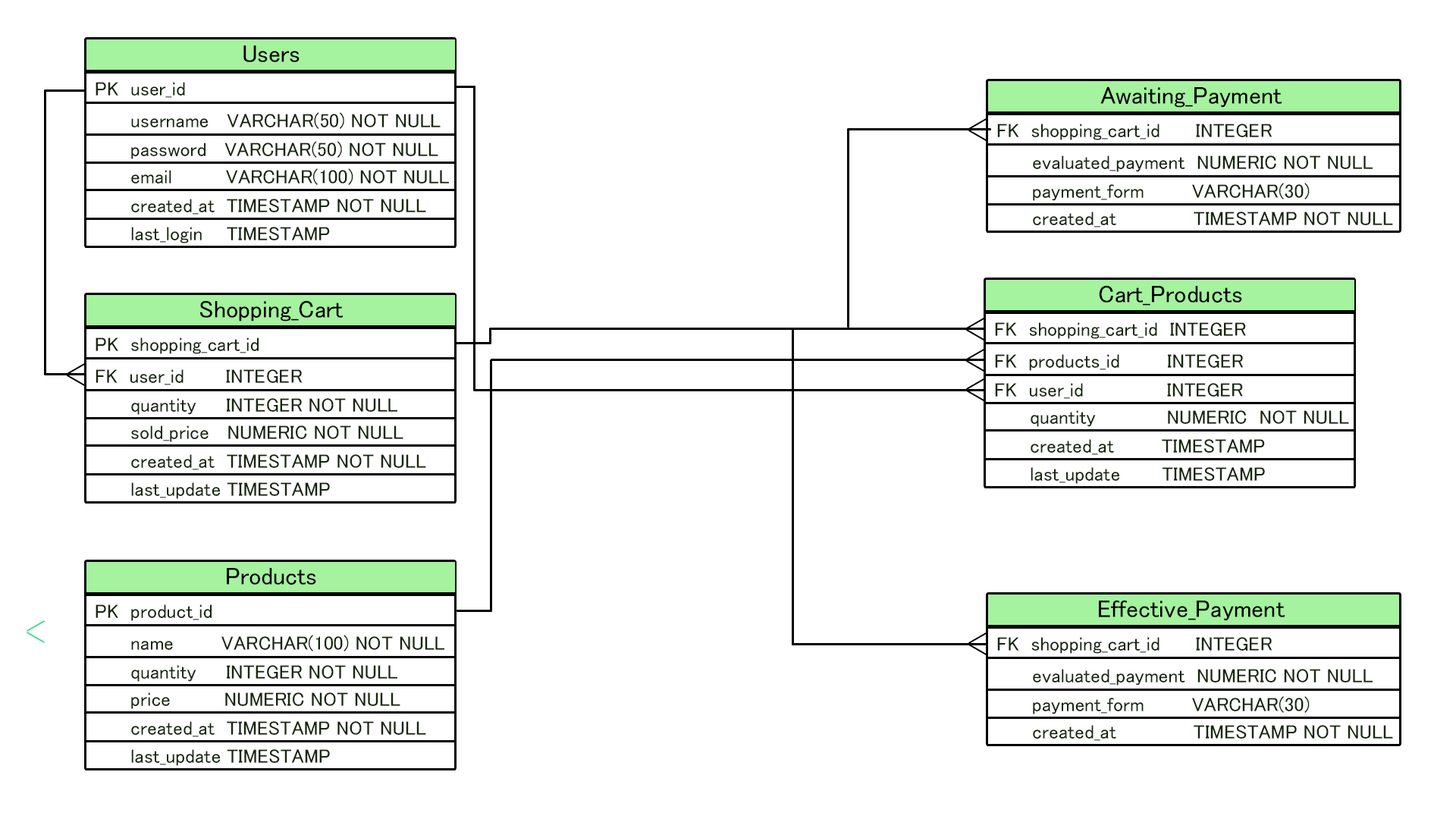
<style>
.page{position:relative;width:1456px;height:819px;background:#ffffff}
.page>*{position:absolute;margin:0}
.t1{font:24.4px "MS-UIGothic";color:#000000}
.t2{font:19.5px "MS-UIGothic";color:#16270d}
</style>
<div class="page">
<p class="t1" style="left:243px;top:45px;width:57px;height:17px">Users</p>
<p class="t2" style="left:96px;top:82px;width:89px;height:16px">PK  user_id</p>
<p class="t1" style="left:1100px;top:86px;width:182px;height:22px">Awaiting_Payment</p>
<p class="t2" style="left:131px;top:112px;width:310px;height:17px">username   VARCHAR(50) NOT NULL</p>
<p class="t2" style="left:997px;top:124px;width:275px;height:16px">FK  shopping_cart_id      INTEGER</p>
<p class="t2" style="left:131px;top:141px;width:307px;height:18px">password   VARCHAR(50) NOT NULL</p>
<p class="t2" style="left:1033px;top:155px;width:340px;height:17px">evaluated_payment  NUMERIC NOT NULL</p>
<p class="t2" style="left:131px;top:168px;width:318px;height:17px">email         VARCHAR(100) NOT NULL</p>
<p class="t2" style="left:1033px;top:183px;width:277px;height:18px">payment_form        VARCHAR(30)</p>
<p class="t2" style="left:131px;top:199px;width:295px;height:16px">created_at  TIMESTAMP NOT NULL</p>
<p class="t2" style="left:1033px;top:212px;width:360px;height:15px">created_at             TIMESTAMP NOT NULL</p>
<p class="t2" style="left:131px;top:227px;width:199px;height:16px">last_login    TIMESTAMP</p>
<p class="t1" style="left:1099px;top:285px;width:143px;height:21px">Cart_Products</p>
<p class="t1" style="left:200px;top:300px;width:143px;height:22px">Shopping_Cart</p>
<p class="t2" style="left:995px;top:322px;width:251px;height:17px">FK  shopping_cart_id  INTEGER</p>
<p class="t2" style="left:96px;top:337px;width:163px;height:17px">PK  shopping_cart_id</p>
<p class="t2" style="left:995px;top:354px;width:249px;height:17px">FK  products_id        INTEGER</p>
<p class="t2" style="left:96px;top:369px;width:207px;height:16px">FK  user_id       INTEGER</p>
<p class="t2" style="left:995px;top:383px;width:248px;height:16px">FK  user_id              INTEGER</p>
<p class="t2" style="left:131px;top:398px;width:266px;height:17px">quantity     INTEGER NOT NULL</p>
<p class="t2" style="left:1031px;top:410px;width:318px;height:17px">quantity            NUMERIC  NOT NULL</p>
<p class="t2" style="left:131px;top:425px;width:272px;height:17px">sold_price   NUMERIC NOT NULL</p>
<p class="t2" style="left:1031px;top:439px;width:234px;height:16px">created_at        TIMESTAMP</p>
<p class="t2" style="left:131px;top:454px;width:295px;height:16px">created_at  TIMESTAMP NOT NULL</p>
<p class="t2" style="left:1031px;top:467px;width:234px;height:17px">last_update       TIMESTAMP</p>
<p class="t2" style="left:131px;top:482px;width:199px;height:17px">last_update TIMESTAMP</p>
<p class="t1" style="left:227px;top:568px;width:89px;height:17px">Products</p>
<p class="t2" style="left:96px;top:604px;width:116px;height:17px">PK  product_id</p>
<p class="t1" style="left:1099px;top:600px;width:186px;height:21px">Effective_Payment</p>
<p class="t2" style="left:131px;top:635px;width:313px;height:16px">name        VARCHAR(100) NOT NULL</p>
<p class="t2" style="left:997px;top:637px;width:275px;height:17px">FK  shopping_cart_id      INTEGER</p>
<p class="t2" style="left:131px;top:665px;width:266px;height:17px">quantity     INTEGER NOT NULL</p>
<p class="t2" style="left:1033px;top:669px;width:340px;height:17px">evaluated_payment  NUMERIC NOT NULL</p>
<p class="t2" style="left:131px;top:692px;width:269px;height:17px">price         NUMERIC NOT NULL</p>
<p class="t2" style="left:1033px;top:696px;width:277px;height:18px">payment_form        VARCHAR(30)</p>
<p class="t2" style="left:131px;top:721px;width:295px;height:16px">created_at  TIMESTAMP NOT NULL</p>
<p class="t2" style="left:1033px;top:725px;width:360px;height:16px">created_at             TIMESTAMP NOT NULL</p>
<p class="t2" style="left:131px;top:749px;width:199px;height:17px">last_update TIMESTAMP</p>
</div>
